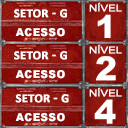
<style>
.page{position:relative;width:128px;height:128px}
.page>*{position:absolute;margin:0}
.t1{font:9.3px "ArialMT";color:#ffffff;text-transform:uppercase;scale:1.23 1}
.t2{font:12px/18.7px "Calibri-Bold";letter-spacing:0.02em;color:#ffffff;text-transform:uppercase;font-weight:bold}
.t3{font:10.7px/18.7px "Arial-Black";letter-spacing:0.02em;color:#ffffff;text-transform:uppercase}
</style>
<div class="page">
<p class="t1" style="left:89px;top:2px;width:33px;height:10px">nível</p>
<p class="t2" style="left:14px;top:9px;width:53px;height:28px;text-align:center">SETOR - G<span class="t3"><br>ACESSO</span></p>
<p class="t2" style="left:14px;top:51px;width:53px;height:28px;text-align:center">SETOR - G<br><span class="t3">ACESSO</span></p>
<p class="t1" style="left:89px;top:44px;width:33px;height:10px">nível</p>
<p class="t1" style="left:89px;top:87px;width:33px;height:10px">nível</p>
<p class="t2" style="left:15px;top:94px;width:54px;height:28px;text-align:center">SETOR - G<br><span class="t3">ACESSO</span></p>
</div>
